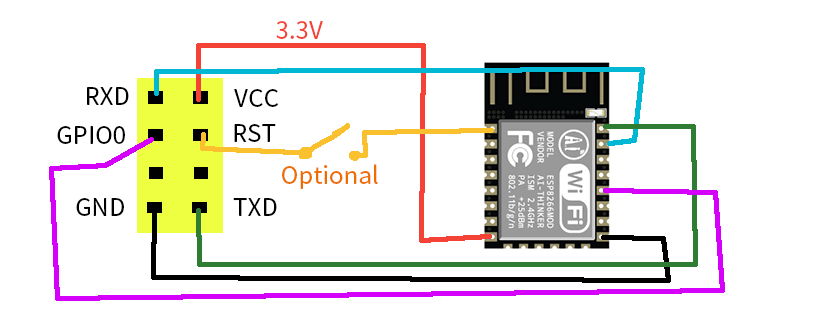
<style>
.page{position:relative;width:820px;height:312px;background:#ffffff}
.page>*{position:absolute;margin:0}
.t1{font:24px "NotoSansCJKtc-Regular";color:#f44336}
.t2{font:24px "NotoSansCJKtc-Regular";color:#000000}
.t3{font:24px "NotoSansCJKtc-Regular";color:#ef6c00}
</style>
<div class="page">
<p class="t1" style="left:276px;top:21px;width:47px;height:18px">3.3V</p>
<p class="t2" style="left:87px;top:87px;width:42px;height:18px">RXD</p>
<p class="t2" style="left:234px;top:89px;width:44px;height:18px">VCC</p>
<p class="t2" style="left:57px;top:126px;width:68px;height:18px">GPIO0</p>
<p class="t2" style="left:234px;top:124px;width:42px;height:18px">RST</p>
<p class="t3" style="left:282px;top:164px;width:96px;height:25px">Optional</p>
<p class="t2" style="left:76px;top:198px;width:48px;height:18px">GND</p>
<p class="t2" style="left:233px;top:198px;width:44px;height:18px">TXD</p>
</div>
